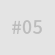
<style>
.page{position:relative;width:55px;height:55px;background:#e4e4e4}
.page>*{position:absolute;margin:0}
.t1{font:18.2px "NotoSansCJKkr-Medium";color:#bcbcbc}
</style>
<div class="page">
<p class="t1" style="left:12px;top:20px;width:30px;height:14px">#05</p>
</div>
